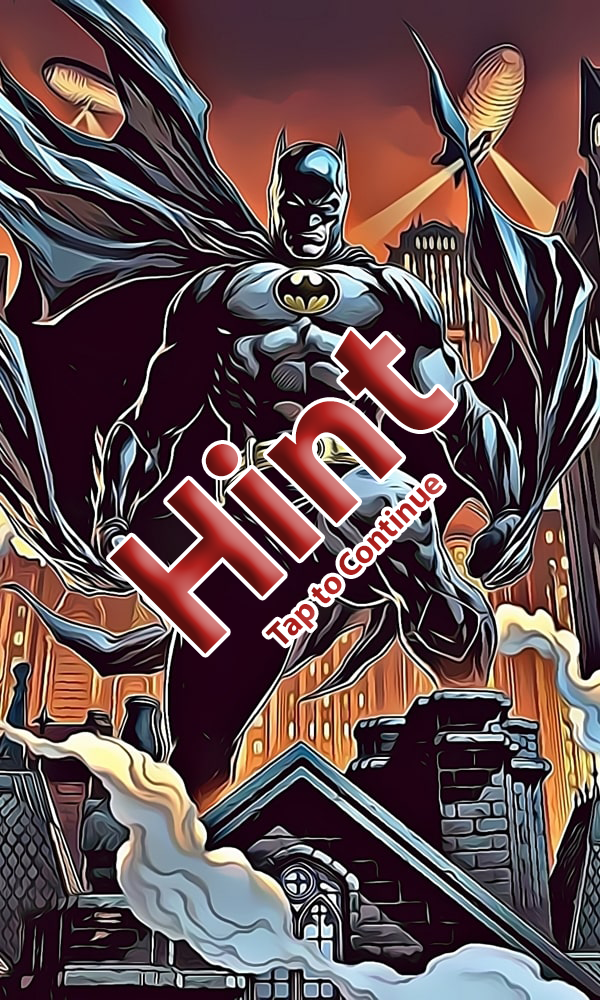
<style>
.page{position:relative;width:600px;height:1000px}
.page>*{position:absolute;margin:0}
.t1{font:33.3px/50px "MyriadPro-Bold"}
.t2{font:200px/424.4px "MyriadPro-Bold"}
</style>
<div class="page">
<p class="t1" style="left:110px;top:330px;width:345px;height:324px;text-align:center;rotate:-45deg"><span class="t2">Hint</span><br>Tap to Continue</p>
</div>
